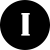
<style>
.page{position:relative;width:50px;height:50px;background:#000000}
.page>*{position:absolute;margin:0}
.t1{font:41.7px "Copperplate";color:#ffffff;text-transform:uppercase;font-weight:bold}
</style>
<div class="page">
<p class="t1" style="left:21px;top:13px;width:9px;height:23px">I</p>
</div>
